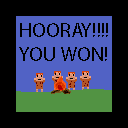
<style>
.page{position:relative;width:128px;height:128px;background:#000000}
.page>*{position:absolute;margin:0}
.t1{font:20px "MyriadPro-Regular";color:#000000}
</style>
<div class="page">
<p class="t1" style="left:19px;top:23px;width:89px;height:38px">HOORAY!!!!<br>YOU WON!</p>
</div>
